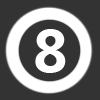
<style>
.page{position:relative;width:100px;height:100px;background:#333333}
.page>*{position:absolute;margin:0}
.t1{font:60px "SegoeUI-Bold";letter-spacing:-0.105em;color:#ffffff}
</style>
<div class="page">
<p class="t1" style="left:35px;top:29px;width:31px;height:44px">8</p>
</div>
